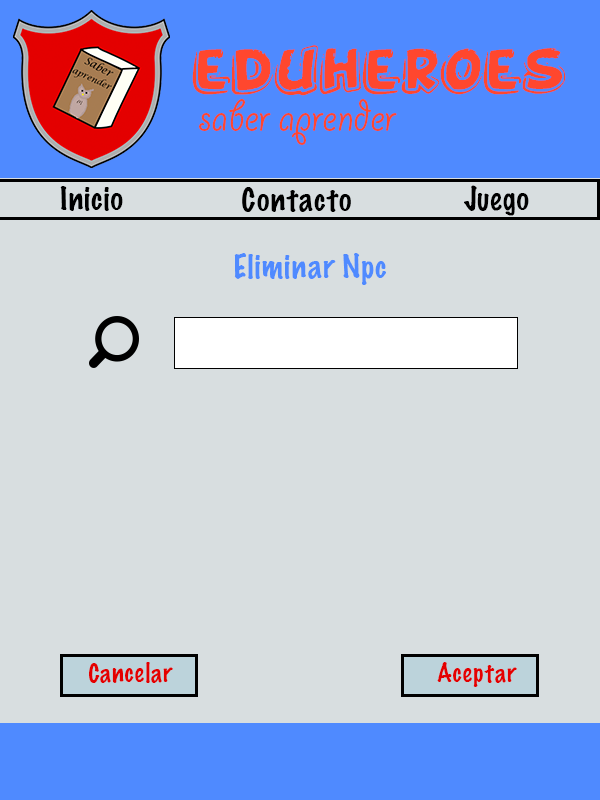
<style>
.page{position:relative;width:600px;height:800px;background:#d8dee0}
.page>*{position:absolute;margin:0}
.t1{font:72px "FunnyKid";color:#ff472e}
.t2{font:48px "GiddyupStd";color:#ff472e}
.t3{font:30px "MarkerFelt-Thin";color:#000000}
.t4{font:30px "MarkerFelt-Thin";color:#4f8aff}
.t5{font:24px "MarkerFelt-Thin"}
</style>
<div class="page">
<p class="t1" style="left:192px;top:45px;width:374px;height:51px">eduheroes</p>
<p class="t2" style="left:199px;top:99px;width:198px;height:46px">saber aprender</p>
<p class="t3" style="left:464px;top:185px;width:65px;height:31px">Juego</p>
<p class="t3" style="left:60px;top:186px;width:63px;height:25px">Inicio</p>
<p class="t3" style="left:242px;top:187px;width:109px;height:25px">Contacto</p>
<p class="t4" style="left:234px;top:253px;width:152px;height:32px">Eliminar Npc</p>
<p class="t5" style="left:437px;top:662px;width:79px;height:21px">Guardar</p>
</div>
